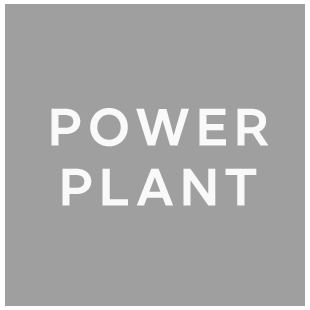
<style>
.page{position:relative;width:310px;height:310px;background:#9f9f9f}
.page>*{position:absolute;margin:0}
.t1{font:50px "CarmenSans-Bold";letter-spacing:0.12em;color:#f9f9f9}
</style>
<div class="page">
<p class="t1" style="left:51px;top:108px;width:218px;height:98px;text-align:center">POWER<br>PLANT</p>
</div>
